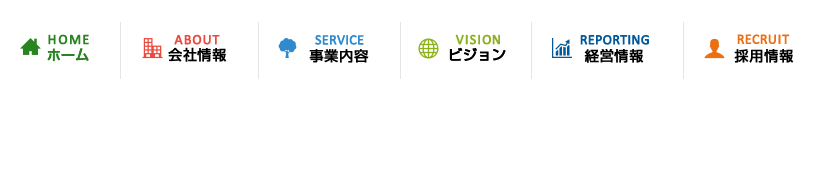
<style>
.page{position:relative;width:823px;height:196px;background:#ffffff}
.page>*{position:absolute;margin:0}
.t1{font:14px "Calibri";color:#288321;font-weight:bold}
.t2{font:14px "Calibri";color:#e94b41;font-weight:bold}
.t3{font:14px "Calibri";color:#2f8ace;font-weight:bold}
.t4{font:14px "Calibri";color:#8cb11c;font-weight:bold}
.t5{font:14px "Calibri";color:#01589a;font-weight:bold}
.t6{font:14px "Calibri";color:#ed6f14;font-weight:bold}
.t7{font:14px "ShinGoPro-Regular";color:#288321;font-weight:bold}
.t8{font:14px "ShinGoPro-Regular";color:#000000;font-weight:bold}
</style>
<div class="page">
<p class="t1" style="left:48px;top:34px;width:41px;height:11px">HOME</p>
<p class="t2" style="left:174px;top:34px;width:46px;height:11px">ABOUT</p>
<p class="t3" style="left:315px;top:35px;width:49px;height:10px">SERVICE</p>
<p class="t4" style="left:455px;top:34px;width:45px;height:11px">VISION</p>
<p class="t5" style="left:580px;top:35px;width:69px;height:10px">REPORTING</p>
<p class="t6" style="left:737px;top:34px;width:53px;height:10px">RECRUIT</p>
<p class="t7" style="left:47px;top:48px;width:42px;height:14px">ホーム</p>
<p class="t8" style="left:168px;top:47px;width:59px;height:15px">会社情報</p>
<p class="t8" style="left:309px;top:49px;width:60px;height:14px">事業内容</p>
<p class="t8" style="left:449px;top:47px;width:57px;height:14px">ビジョン</p>
<p class="t8" style="left:584px;top:48px;width:60px;height:15px">経営情報</p>
<p class="t8" style="left:734px;top:49px;width:60px;height:14px">採用情報</p>
</div>
